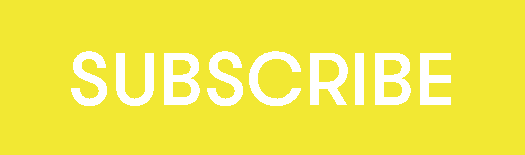
<style>
.page{position:relative;width:525px;height:155px;background:#f2e833}
.page>*{position:absolute;margin:0}
.t1{font:75px "GTWalsheimProTrial-Medium";color:#ffffff}
</style>
<div class="page">
<p class="t1" style="left:71px;top:51px;width:380px;height:55px">SUBSCRIBE</p>
</div>
